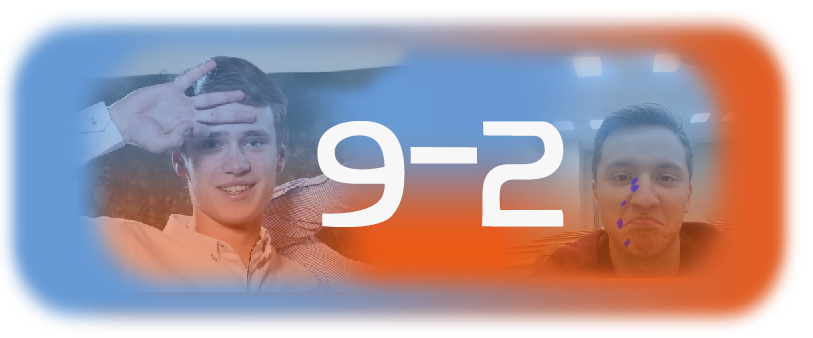
<style>
.page{position:relative;width:813px;height:338px}
.page>*{position:absolute;margin:0}
.t1{font:145.9px "Orbit-Bold";color:#f7f7f7;text-transform:uppercase;font-weight:bold;scale:0.88 1}
</style>
<div class="page">
<p class="t1" style="left:317px;top:121px;width:247px;height:106px">9-2</p>
</div>
